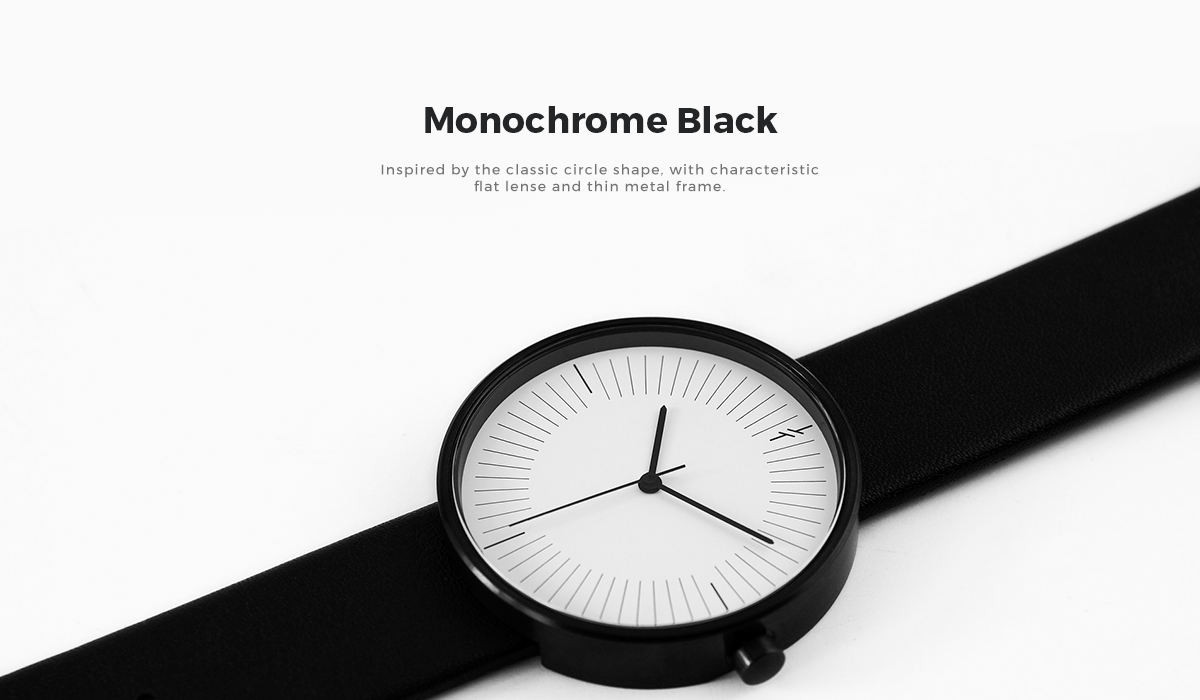
<style>
.page{position:relative;width:1200px;height:700px;background:#fafafa}
.page>*{position:absolute;margin:0}
.t1{font:36px "Montserrat-Bold";color:#242526}
.t2{font:14px "Montserrat-Regular";letter-spacing:0.08em;color:#747474}
</style>
<div class="page">
<p class="t1" style="left:425px;top:106px;width:353px;height:27px">Monochrome Black</p>
<p class="t2" style="left:381px;top:164px;width:438px;height:28px;text-align:center">Inspired by the classic circle shape, with characteristic <br>flat lense and thin metal frame.</p>
</div>
